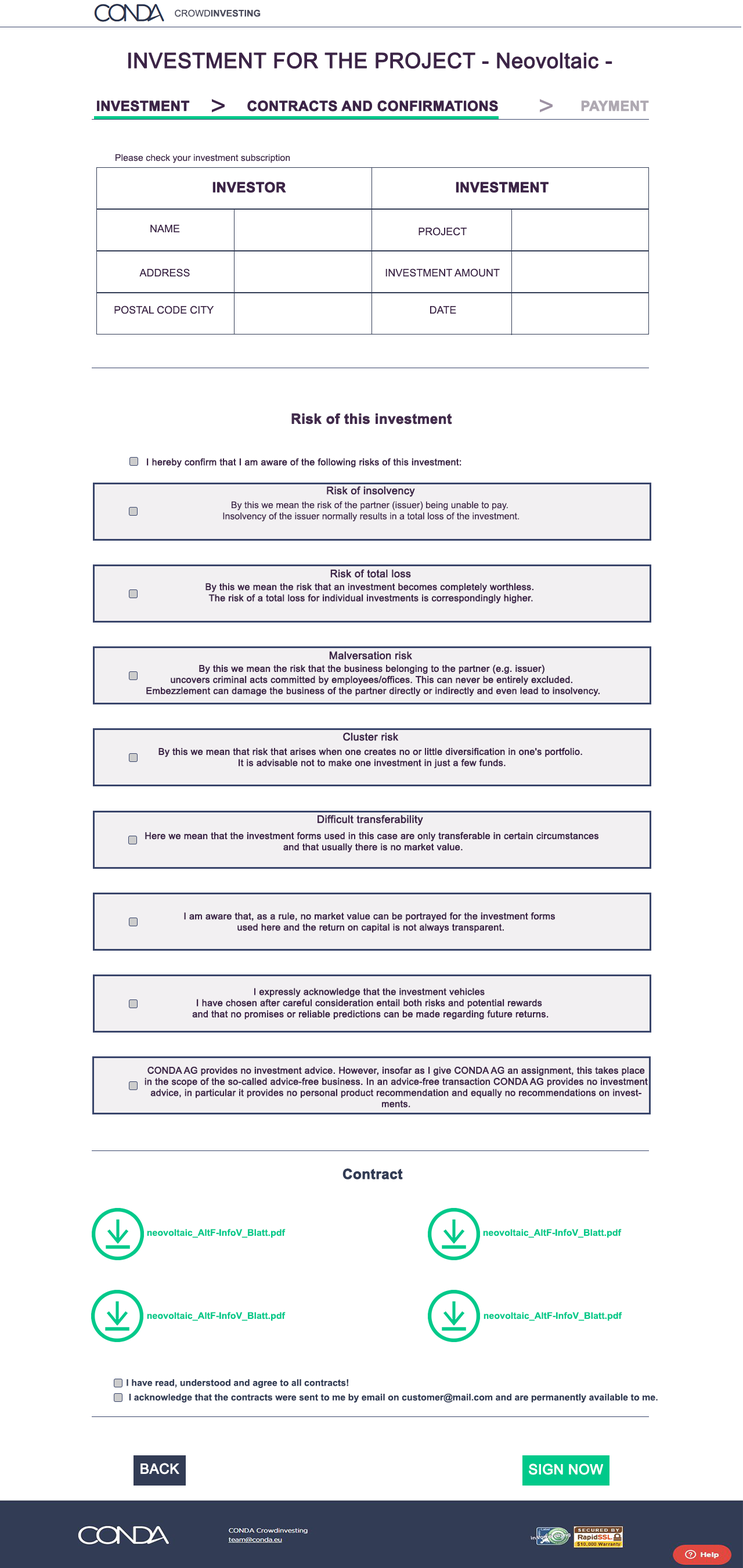
<style>
.page{position:relative;width:743px;height:1568px;background:#ffffff}
.page>*{position:absolute;margin:0}
.t1{font:9.3px "Arial-BoldMT";color:#4a4b5c}
.t2{font:9.3px "ArialMT";color:#4a4b5c}
.t3{font:21.1px "ArialMT";color:#3c2447;font-weight:bold}
.t4{font:13.9px "Arial-BoldMT";color:#3c2447;font-weight:bold}
.t5{font:13.9px "Arial-BoldMT";color:#afa9b2;font-weight:bold}
.t6{font:9.3px "ArialMT";color:#3c2447}
.t7{font:10.5px "ArialMT";color:#3c2447}
.t8{font:13.9px "Arial-BoldMT";color:#422b4c;font-weight:bold}
.t9{font:9.3px "ArialMT";color:#3c2447;font-weight:bold}
.t10{font:10.5px "ArialMT";color:#3c2447;font-weight:bold}
.t11{font:13.9px "Arial-BoldMT";color:#323c55;font-weight:bold}
.t12{font:9.3px "Arial-BoldMT";color:#00c98a}
.t13{font:9.3px "Arial-BoldMT";color:#323c55}
.t14{font:13.9px "ArialMT";color:#ffffff;font-weight:bold}
</style>
<div class="page">
<p class="t1" style="left:175px;top:9px;width:86px;height:8px"><span class="t2">CROWD</span>INVESTING</p>
<p class="t3" style="left:128px;top:52px;width:485px;height:17px">INVESTMENT FOR THE PROJECT - Neovoltaic -</p>
<p class="t4" style="left:97px;top:100px;width:93px;height:12px">INVESTMENT</p>
<p class="t4" style="left:247px;top:100px;width:251px;height:12px">CONTRACTS AND CONFIRMATIONS</p>
<p class="t5" style="left:581px;top:100px;width:68px;height:12px">PAYMENT</p>
<p class="t6" style="left:116px;top:154px;width:174px;height:9px">Please check your investment subscription</p>
<p class="t4" style="left:213px;top:182px;width:73px;height:11px">INVESTOR</p>
<p class="t4" style="left:456px;top:182px;width:93px;height:11px">INVESTMENT</p>
<p class="t7" style="left:150px;top:225px;width:30px;height:7px">NAME</p>
<p class="t7" style="left:419px;top:227px;width:48px;height:9px">PROJECT</p>
<p class="t7" style="left:139px;top:268px;width:51px;height:9px">ADDRESS</p>
<p class="t7" style="left:386px;top:268px;width:114px;height:9px">INVESTMENT AMOUNT</p>
<p class="t7" style="left:114px;top:305px;width:100px;height:9px">POSTAL CODE CITY</p>
<p class="t7" style="left:430px;top:306px;width:26px;height:8px">DATE</p>
<p class="t8" style="left:292px;top:413px;width:160px;height:12px">Risk of this investment</p>
<p class="t9" style="left:147px;top:458px;width:315px;height:9px">I hereby confirm that I am aware of the following risks of this investment:</p>
<p class="t10" style="left:327px;top:486px;width:88px;height:11px">Risk of insolvency</p>
<p class="t6" style="left:223px;top:501px;width:296px;height:21px;text-align:center">By this we mean the risk of the partner (issuer) being unable to pay.<br> Insolvency of the issuer normally results in a total loss of the investment.</p>
<p class="t10" style="left:330px;top:569px;width:81px;height:9px">Risk of total loss</p>
<p class="t9" style="left:206px;top:583px;width:328px;height:20px;text-align:center">By this we mean the risk that an investment becomes completely worthless.<br> The risk of a total loss for individual investments is correspondingly higher.</p>
<p class="t10" style="left:329px;top:651px;width:83px;height:9px">Malversation risk</p>
<p class="t9" style="left:146px;top:664px;width:454px;height:32px;text-align:center">By this we mean the risk that the business belonging to the partner (e.g. issuer) <br>uncovers criminal acts committed by employees/offices. This can never be entirely excluded. <br>Embezzlement can damage the business of the partner directly or indirectly and even lead to insolvency.</p>
<p class="t10" style="left:343px;top:732px;width:56px;height:9px">Cluster risk</p>
<p class="t9" style="left:159px;top:747px;width:423px;height:21px;text-align:center">By this we mean that risk that arises when one creates no or little diversification in one's portfolio.<br> It is advisable not to make one investment in just a few funds.</p>
<p class="t10" style="left:318px;top:815px;width:105px;height:11px">Difficult transferability</p>
<p class="t9" style="left:145px;top:832px;width:454px;height:21px;text-align:center">Here we mean that the investment forms used in this case are only transferable in certain circumstances <br>and that usually there is no market value.</p>
<p class="t9" style="left:184px;top:912px;width:372px;height:21px;text-align:center">I am aware that, as a rule, no market value can be portrayed for the investment forms <br>used here and the return on capital is not always transparent.</p>
<p class="t9" style="left:192px;top:988px;width:357px;height:32px;text-align:center">I expressly acknowledge that the investment vehicles <br>I have chosen after careful consideration entail both risks and potential rewards <br>and that no promises or reliable predictions can be made regarding future returns.</p>
<p class="t9" style="left:145px;top:1066px;width:503px;height:41px;text-align:center">CONDA AG provides no investment advice. However, insofar as I give CONDA AG an assignment, this takes place in the scope of the so-called advice-free business. In an advice-free transaction CONDA AG provides no investment advice, in particular it provides no personal product recommendation and equally no recommendations on investments.</p>
<p class="t11" style="left:343px;top:1168px;width:60px;height:11px">Contract</p>
<p class="t12" style="left:147px;top:1229px;width:139px;height:9px">neovoltaic_AltF-InfoV_Blatt.pdf</p>
<p class="t12" style="left:483px;top:1229px;width:139px;height:9px">neovoltaic_AltF-InfoV_Blatt.pdf</p>
<p class="t12" style="left:147px;top:1312px;width:139px;height:9px">neovoltaic_AltF-InfoV_Blatt.pdf</p>
<p class="t12" style="left:484px;top:1312px;width:139px;height:9px">neovoltaic_AltF-InfoV_Blatt.pdf</p>
<p class="t13" style="left:127px;top:1379px;width:221px;height:9px">I have read, understood and agree to all contracts!</p>
<p class="t13" style="left:129px;top:1393px;width:529px;height:9px">I acknowledge that the contracts were sent to me by email on customer@mail.com and are permanently available to me.</p>
<p class="t14" style="left:141px;top:1463px;width:38px;height:12px">BACK</p>
<p class="t14" style="left:529px;top:1463px;width:74px;height:12px">SIGN NOW</p>
</div>
